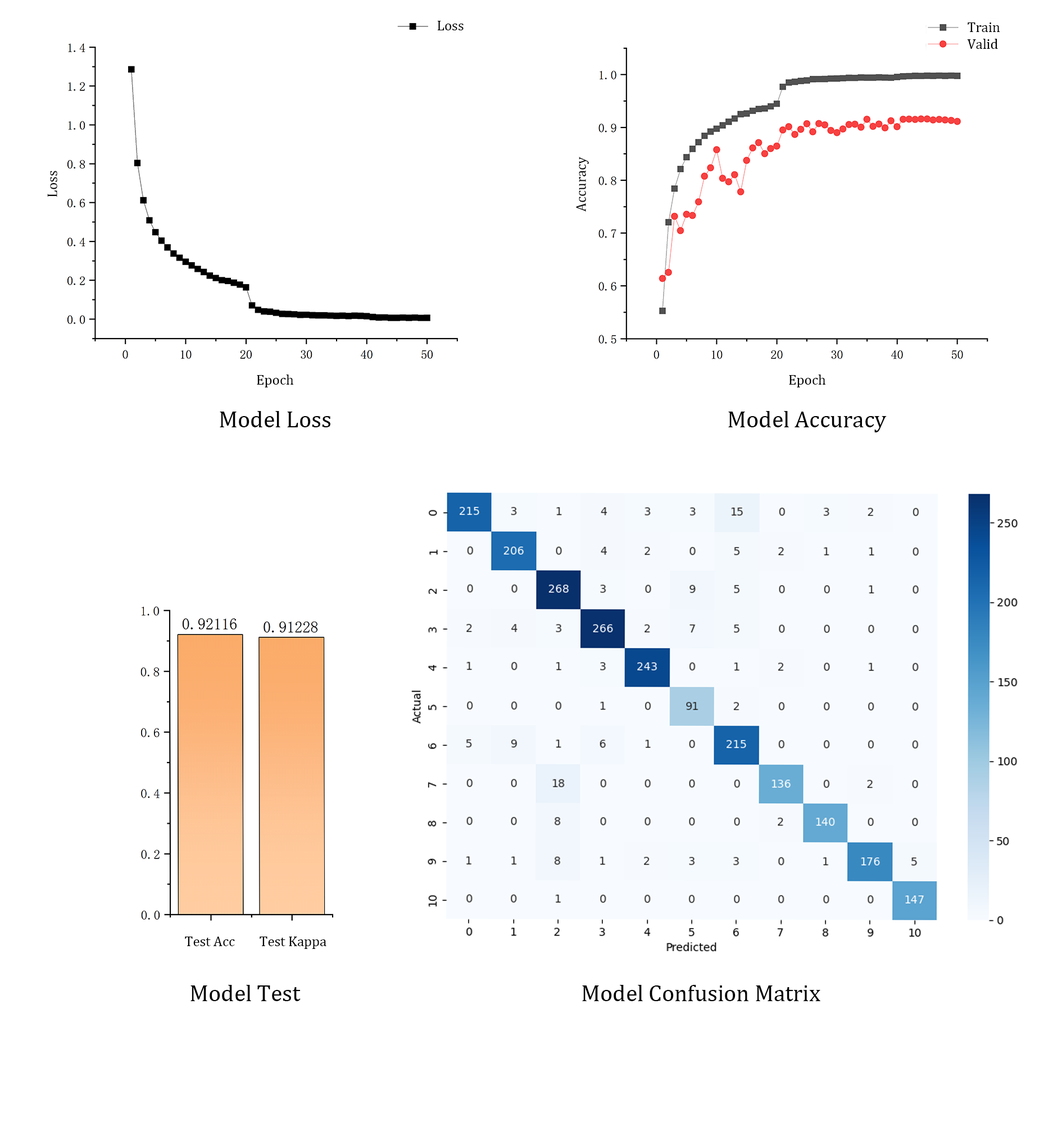
<style>
.page{position:relative;width:1062px;height:1123px;background:#ffffff}
.page>*{position:absolute;margin:0}
.t1{font:14px "CambriaMath";color:#000000}
.t2{font:23.4px "CambriaMath";color:#000000}
</style>
<div class="page">
<p class="t1" style="left:437px;top:21px;width:26px;height:9px">Loss</p>
<p class="t1" style="left:967px;top:22px;width:33px;height:10px">Train</p>
<p class="t1" style="left:967px;top:39px;width:31px;height:10px">Valid</p>
<p class="t1" style="left:576px;top:157px;width:13px;height:55px;rotate:-90deg">Accuracy</p>
<p class="t1" style="left:47px;top:171px;width:10px;height:26px;rotate:-90deg">Loss</p>
<p class="t1" style="left:257px;top:375px;width:36px;height:13px">Epoch</p>
<p class="t1" style="left:789px;top:375px;width:36px;height:13px">Epoch</p>
<p class="t2" style="left:220px;top:411px;width:110px;height:16px">Model Loss</p>
<p class="t2" style="left:728px;top:411px;width:158px;height:21px">Model Accuracy</p>
<p class="t1" style="left:185px;top:937px;width:50px;height:9px">Test Acc</p>
<p class="t1" style="left:259px;top:937px;width:67px;height:12px">Test Kappa</p>
<p class="t2" style="left:190px;top:985px;width:110px;height:16px">Model Test</p>
<p class="t2" style="left:582px;top:985px;width:238px;height:16px">Model Confusion Matrix</p>
</div>
